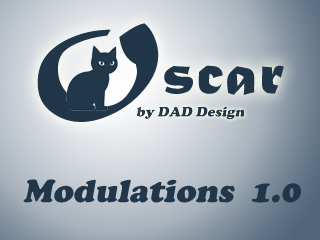
<style>
.page{position:relative;width:320px;height:240px}
.page>*{position:absolute;margin:0}
.t1{font:64.4px "MaturaMTScriptCapitals";letter-spacing:0.025em;color:#213749}
.t2{font:107.3px "MaturaMTScriptCapitals";letter-spacing:0.025em;color:#213749}
.t3{font:14.3px "CooperBlack";color:#213749;font-style:italic}
.t4{font:33.3px "CooperBlack";color:#213749;font-style:italic}
</style>
<div class="page">
<p class="t1" style="left:37px;top:23px;width:247px;height:99px"><span class="t2">O</span>scar</p>
<p class="t3" style="left:136px;top:106px;width:109px;height:14px">by DAD Design</p>
<p class="t4" style="left:23px;top:179px;width:278px;height:24px">Modulations  1.0</p>
</div>
